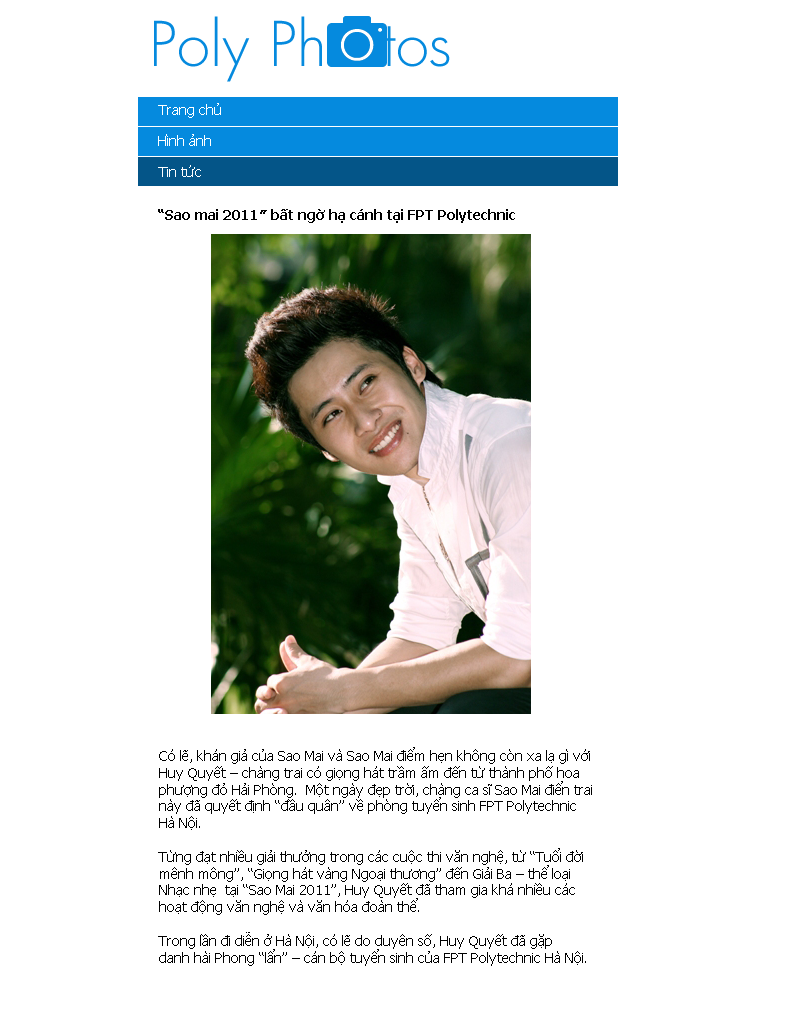
<style>
.page{position:relative;width:800px;height:1019px;background:#ffffff}
.page>*{position:absolute;margin:0}
.t1{font:14px "Tahoma";color:#ffffff}
.t2{font:14px "Tahoma-Bold";color:#000000}
.t3{font:14px "Tahoma";color:#000000}
</style>
<div class="page">
<p class="t1" style="left:158px;top:103px;width:63px;height:15px">Trang chủ</p>
<p class="t1" style="left:158px;top:134px;width:53px;height:12px">Hình ảnh</p>
<p class="t1" style="left:158px;top:165px;width:43px;height:12px">Tin tức</p>
<p class="t2" style="left:158px;top:209px;width:357px;height:14px">“Sao mai 2011″ bất ngờ hạ cánh tại FPT Polytechnic</p>
<p class="t3" style="left:158px;top:747px;width:434px;height:219px">Có lẽ, khán giả của Sao Mai và Sao Mai điểm hẹn không còn xa lạ gì với <br>Huy Quyết – chàng trai có giọng hát trầm ấm đến từ thành phố hoa <br>phượng đỏ Hải Phòng.  Một ngày đẹp trời, chàng ca sĩ Sao Mai điển trai <br>này đã quyết định “đầu quân” về phòng tuyển sinh FPT Polytechnic <br>Hà Nội.<br><br>Từng đạt nhiều giải thưởng trong các cuộc thi văn nghệ, từ “Tuổi đời <br>mênh mông”, “Giọng hát vàng Ngoại thương” đến Giải Ba – thể loại <br>Nhạc nhẹ  tại “Sao Mai 2011”, Huy Quyết đã tham gia khá nhiều các <br>hoạt động văn nghệ và văn hóa đoàn thể.<br><br>Trong lần đi diễn ở Hà Nội, có lẽ do duyên số, Huy Quyết đã gặp <br>danh hài Phong “lẩn” – cán bộ tuyển sinh của FPT Polytechnic Hà Nội.</p>
</div>
